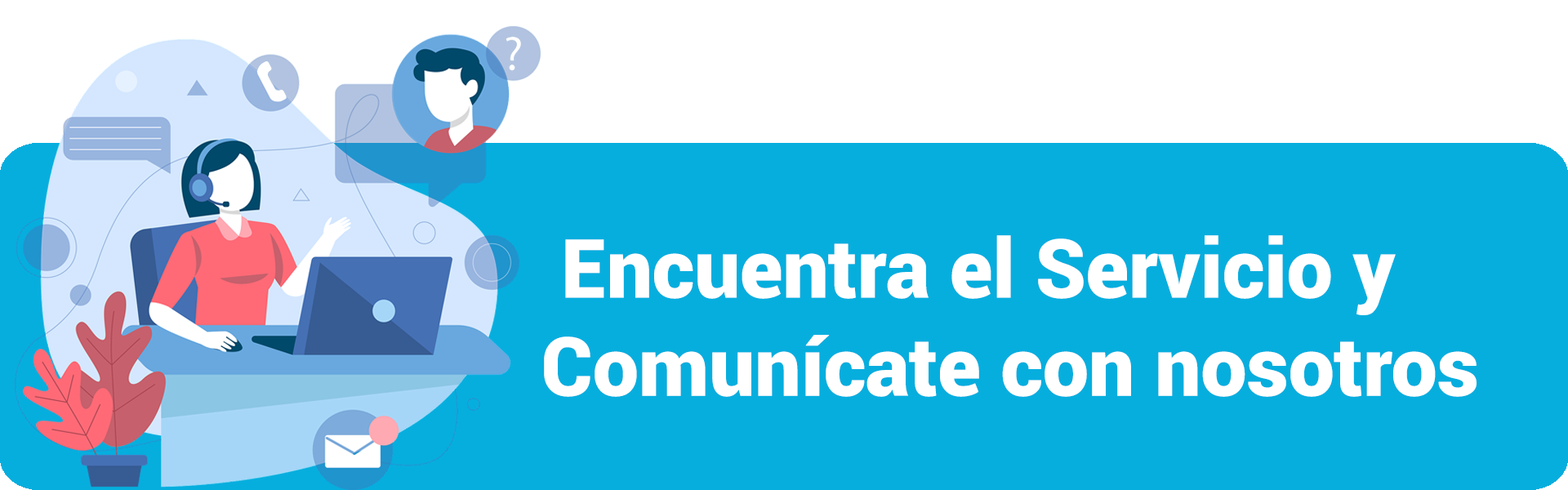
<style>
.page{position:relative;width:1568px;height:490px;background:#06aede}
.page>*{position:absolute;margin:0}
.t1{font:81.7px "Roboto-Black";color:#ffffff}
</style>
<div class="page">
<p class="t1" style="left:544px;top:235px;width:933px;height:162px;text-align:right">Encuentra el Servicio y <br> Comunícate con nosotros</p>
</div>
